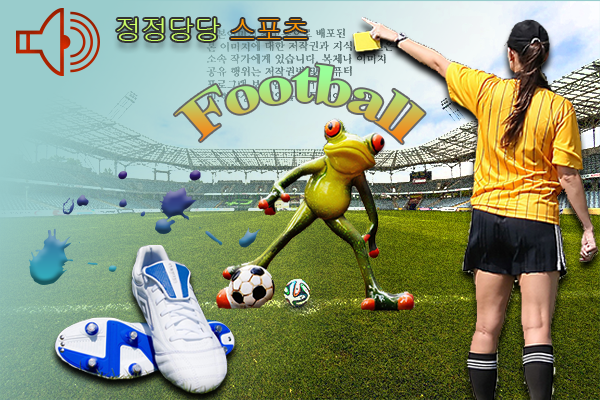
<style>
.page{position:relative;width:600px;height:400px}
.page>*{position:absolute;margin:0}
.t1{font:28.1px "Gulim";letter-spacing:-0.05em;color:#ccff66}
.t2{font:28.1px "Gulim";letter-spacing:-0.05em;color:#ff9900}
.t3{font:55.6px "TimesNewRomanPS-BoldMT";letter-spacing:-0.05em}
</style>
<div class="page">
<p class="t1" style="left:117px;top:18px;width:190px;height:23px">정정당당 <span class="t2">스포츠</span></p>
<p class="t3" style="left:174px;top:64px;width:251px;height:80px">Football</p>
</div>
